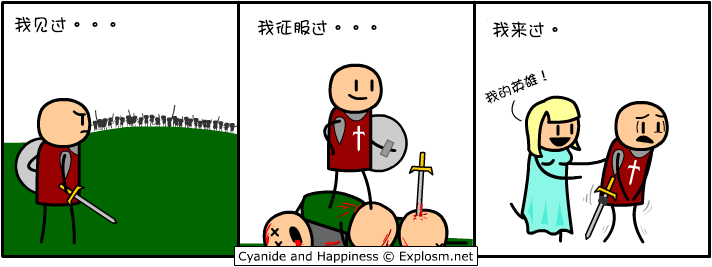
<style>
.page{position:relative;width:712px;height:267px;background:#ffffff}
.page>*{position:absolute;margin:0}
.t1{font:18px "DFGirl";color:#000000}
.t2{font:14px "DFGirl";color:#000000}
</style>
<div class="page">
<p class="t1" style="left:14px;top:16px;width:102px;height:17px">我见过。。。</p>
<p class="t1" style="left:257px;top:19px;width:120px;height:17px">我征服过。。。</p>
<p class="t1" style="left:492px;top:21px;width:66px;height:17px">我来过。</p>
<p class="t2" style="left:484px;top:70px;width:63px;height:34px;rotate:-23deg">我的英雄！</p>
</div>
